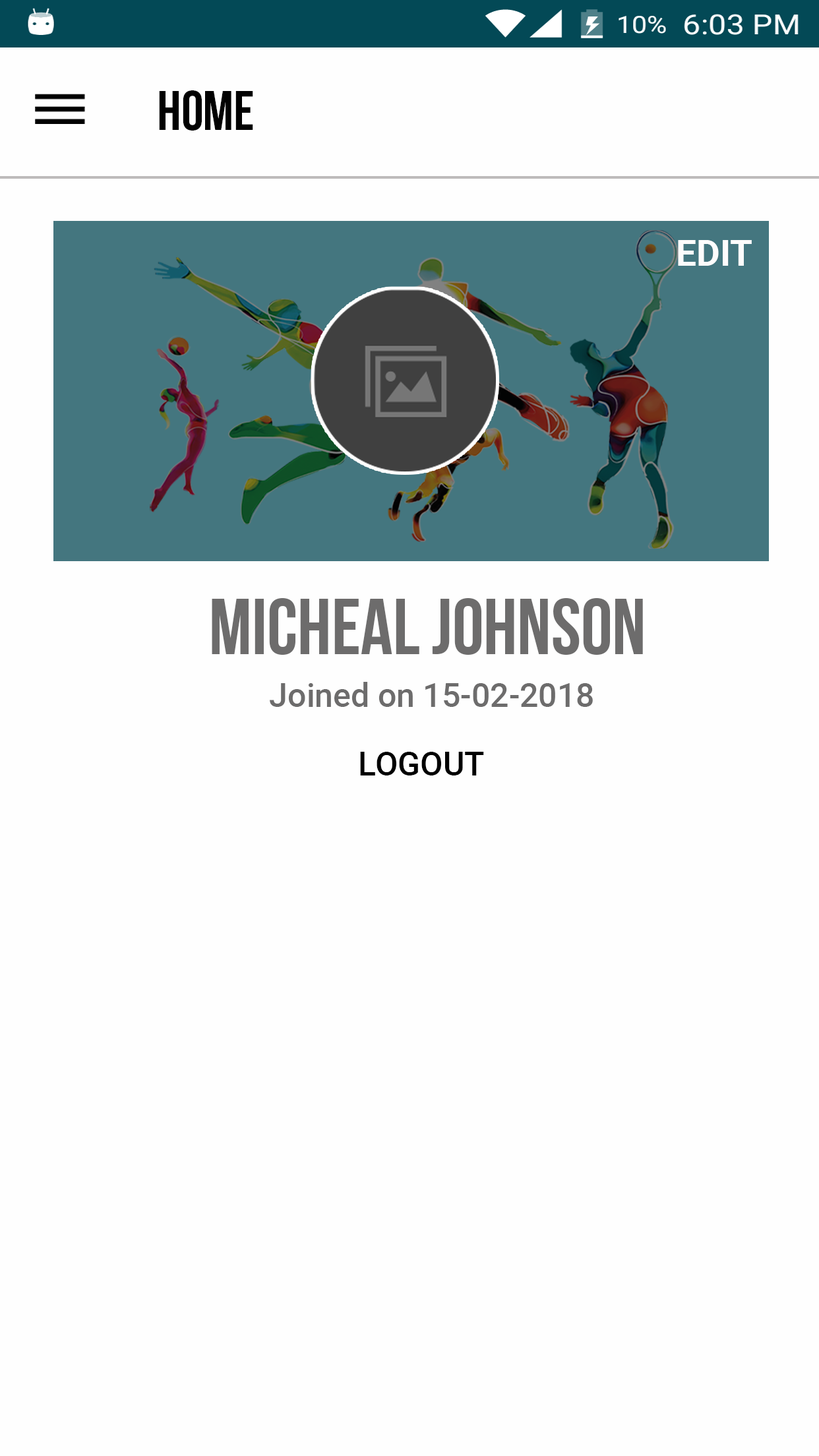
<style>
.page{position:relative;width:819px;height:1456px;background:#fefefe}
.page>*{position:absolute;margin:0}
.t1{font:56px "BebasNeueBold";color:#010101}
.t2{font:36.3px "Roboto-Bold";color:#fefcfc}
.t3{font:79.1px "BebasNeueBold";color:#6d6c6c}
.t4{font:33px "Roboto-Medium";color:#6d6c6c}
.t5{font:33px "Roboto-Medium";color:#000000}
</style>
<div class="page">
<p class="t1" style="left:159px;top:90px;width:94px;height:41px">HOME</p>
<p class="t2" style="left:678px;top:240px;width:74px;height:26px">EDIT</p>
<p class="t3" style="left:212px;top:598px;width:431px;height:57px">MICHEAL JOHNSON</p>
<p class="t4" style="left:270px;top:682px;width:323px;height:25px">Joined on 15-02-2018</p>
<p class="t5" style="left:360px;top:752px;width:124px;height:23px">LOGOUT</p>
</div>
